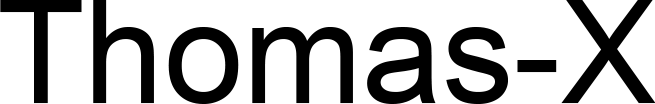
<style>
.page{position:relative;width:655px;height:104px;background:#ffffff}
.page>*{position:absolute;margin:0}
.t1{font:143px "ArialMT";color:#000000}
</style>
<div class="page">
<p class="t1" style="left:0px;top:0px;width:656px;height:104px">Thomas-X</p>
</div>
